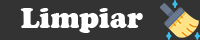
<style>
.page{position:relative;width:200px;height:40px;background:#333333}
.page>*{position:absolute;margin:0}
.t1{font:30px "CooperBlack";color:#ffffff}
</style>
<div class="page">
<p class="t1" style="left:20px;top:8px;width:123px;height:25px">Limpiar</p>
</div>
